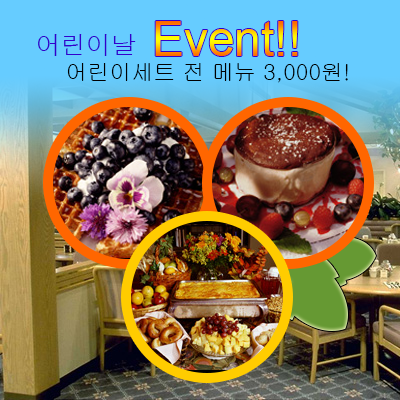
<style>
.page{position:relative;width:400px;height:400px}
.page>*{position:absolute;margin:0}
.t1{font:48px "ArialMT"}
.t2{font:25px "Dotum";color:#3300cc}
.t3{font:22px "Gulim";color:#000000}
</style>
<div class="page">
<p class="t1" style="left:155px;top:21px;width:143px;height:35px">Event!!</p>
<p class="t2" style="left:38px;top:34px;width:98px;height:22px">어린이날</p>
<p class="t3" style="left:67px;top:63px;width:281px;height:20px">어린이세트 전 메뉴 3,000원!</p>
</div>
